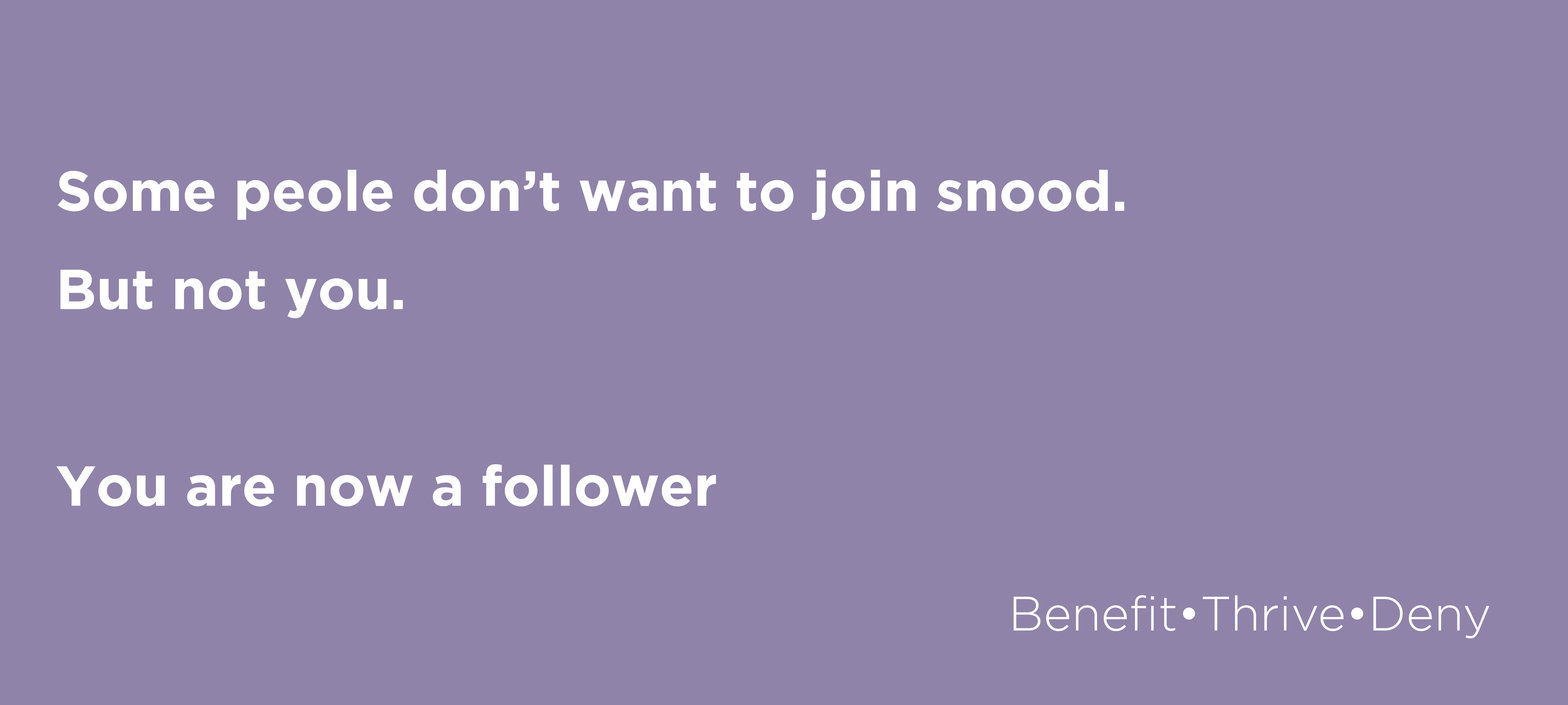
<style>
.page{position:relative;width:1568px;height:705px;background:#8f83a9}
.page>*{position:absolute;margin:0}
.t1{font:56.2px/98.4px "Gotham-Bold";color:#ffffff}
.t2{font:48.1px "Gotham-Light";color:#ffffff}
</style>
<div class="page">
<p class="t1" style="left:56px;top:170px;width:1068px;height:337px">Some peole don’t want to join snood.<br>But not you. <br><br>You are now a follower</p>
<p class="t2" style="left:1014px;top:595px;width:475px;height:44px">Benefit•Thrive•Deny</p>
</div>
